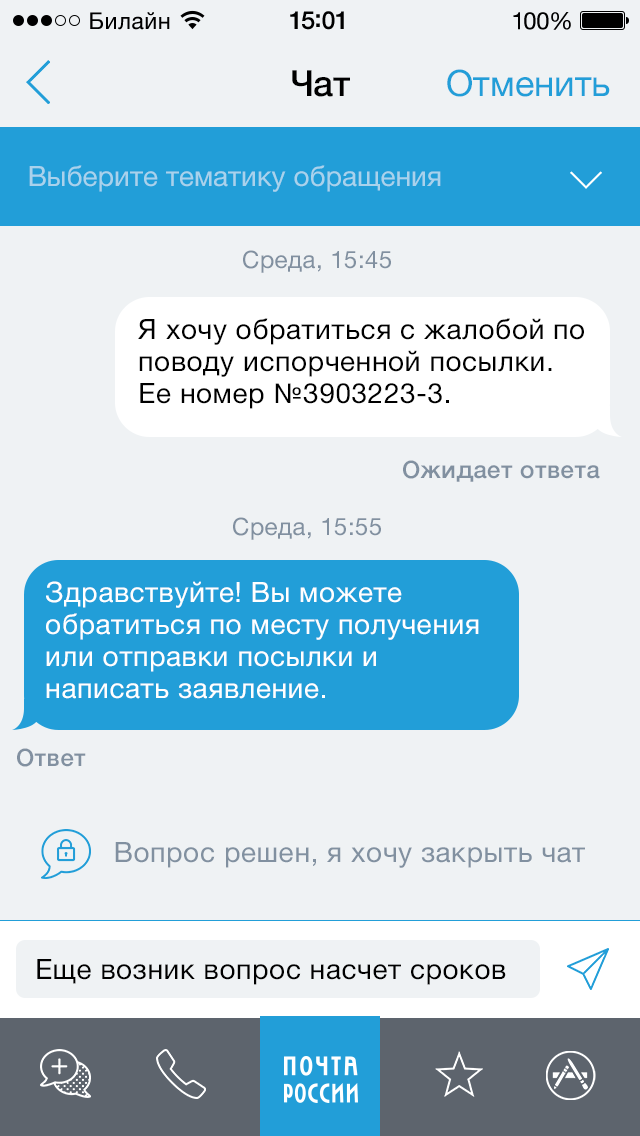
<style>
.page{position:relative;width:640px;height:1136px;background:#eff2f4}
.page>*{position:absolute;margin:0}
.t1{font:36px "HelveticaNeue-Medium";color:#000000}
.t2{font:36px "HelveticaNeue";color:#229ed8}
.t3{font:28px "HelveticaNeue";color:#a9d2ec}
.t4{font:24px "HelveticaNeue";letter-spacing:0.02em;color:#8190a0}
.t5{font:28px/32px "HelveticaNeue";letter-spacing:0.02em;color:#000000}
.t6{font:24px "HelveticaNeue-Medium";letter-spacing:0.02em;color:#8190a0}
.t7{font:28px/32px "HelveticaNeue";letter-spacing:0.02em;color:#ffffff}
.t8{font:28px "HelveticaNeue";letter-spacing:0.02em;color:#8190a0}
.t9{font:28px "HelveticaNeue";letter-spacing:0.02em;color:#000000}
</style>
<div class="page">
<p class="t1" style="left:292px;top:70px;width:58px;height:27px">Чат</p>
<p class="t2" style="left:447px;top:69px;width:163px;height:28px">Отменить</p>
<p class="t3" style="left:29px;top:165px;width:412px;height:27px">Выберите тематику обращения</p>
<p class="t4" style="left:243px;top:250px;width:148px;height:23px">Среда, 15:45</p>
<p class="t5" style="left:138px;top:318px;width:446px;height:91px">Я хочу обратиться с жалобой по <br>поводу испорченной посылки.<br>Ее номер №3903223-3.</p>
<p class="t6" style="left:403px;top:460px;width:197px;height:22px">Ожидает ответа</p>
<p class="t4" style="left:233px;top:517px;width:148px;height:23px">Среда, 15:55</p>
<p class="t7" style="left:46px;top:581px;width:433px;height:118px">Здравствуйте! Вы можете <br>обратиться по месту получения <br>или отправки посылки и <br>написать заявление.</p>
<p class="t6" style="left:17px;top:748px;width:69px;height:19px">Ответ</p>
<p class="t8" style="left:115px;top:842px;width:470px;height:26px">Вопрос решен, я хочу закрыть чат</p>
<p class="t9" style="left:37px;top:959px;width:469px;height:26px">Еще возник вопрос насчет сроков</p>
</div>
